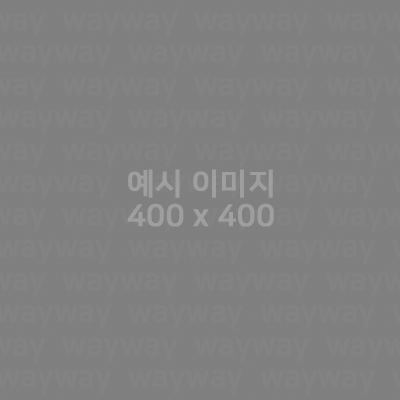
<style>
.page{position:relative;width:400px;height:400px}
.page>*{position:absolute;margin:0}
.t1{font:30px/32.5px "NanumSquareB";color:#9e9e9e;font-weight:bold}
</style>
<div class="page">
<p class="t1" style="left:127px;top:169px;width:147px;height:58px;text-align:center">예시 이미지<br>400 x 400</p>
</div>
